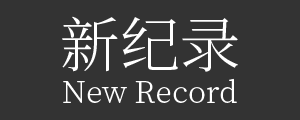
<style>
.page{position:relative;width:300px;height:120px;background:#333333}
.page>*{position:absolute;margin:0}
.t1{font:60px "SourceHanSerifCN-Light";color:#ffffff}
.t2{font:30px "SourceHanSerifCN-Light";color:#ffffff}
</style>
<div class="page">
<p class="t1" style="left:62px;top:16px;width:176px;height:56px">新纪录</p>
<p class="t2" style="left:63px;top:78px;width:174px;height:25px">New Record</p>
</div>
